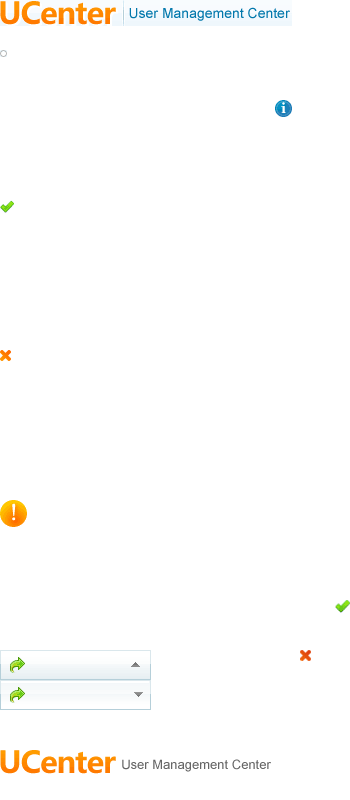
<style>
.page{position:relative;width:350px;height:800px;background:#ffffff}
.page>*{position:absolute;margin:0}
.t1{font:14px "ArialMT";color:#0278ac}
.t2{font:13px "ArialMT";color:#666666}
</style>
<div class="page">
<p class="t1" style="left:128px;top:6px;width:162px;height:17px">User Management Center</p>
<p class="t2" style="left:121px;top:758px;width:150px;height:15px">User Management Center</p>
</div>
